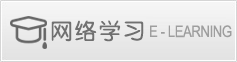
<style>
.page{position:relative;width:237px;height:62px}
.page>*{position:absolute;margin:0}
.t1{font:22px "ZhunYuan";letter-spacing:0.1em;color:#707070}
.t2{font:16px "ArialNarrow";letter-spacing:-0.025em;color:#9e9e9e}
</style>
<div class="page">
<p class="t1" style="left:51px;top:20px;width:93px;height:22px">网络学习</p>
<p class="t2" style="left:150px;top:25px;width:82px;height:13px">E - LEARNING</p>
</div>
